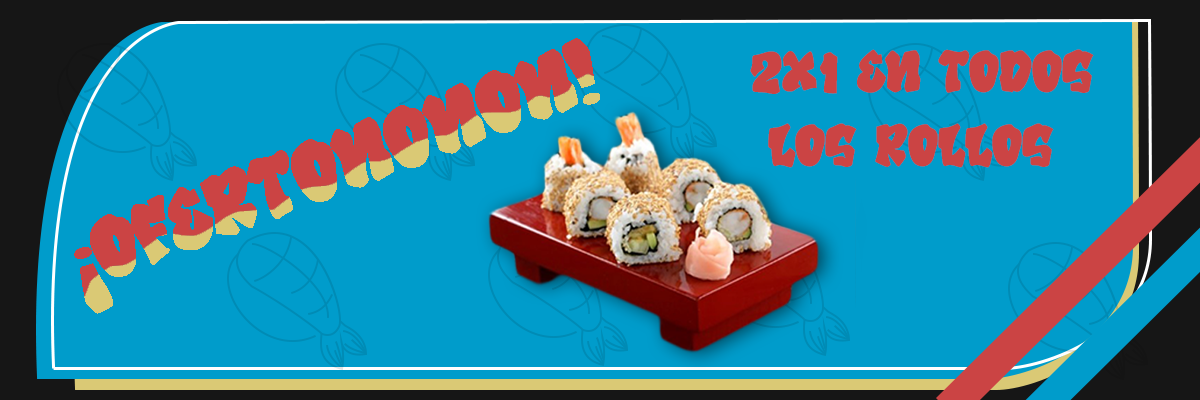
<style>
.page{position:relative;width:1200px;height:400px;background:#009ccb}
.page>*{position:absolute;margin:0}
.t1{font:61.5px "GrafiteRegular";color:#cb4444}
</style>
<div class="page">
<p class="t1" style="left:750px;top:49px;width:344px;height:119px">2x1 en todos<br> los rollos</p>
</div>
